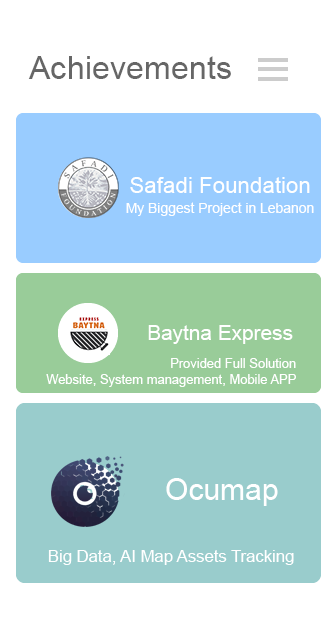
<style>
.page{position:relative;width:336px;height:626px;background:#ffffff}
.page>*{position:absolute;margin:0}
.t1{font:32.3px "ArialMT";color:#666666}
.t2{font:22.4px "ArialMT";color:#ffffff}
.t3{font:13.9px "ArialMT";color:#ffffff}
.t4{font:20.8px "ArialMT";color:#ffffff}
.t5{font:12.9px "ArialMT";color:#ffffff}
.t6{font:30px "ArialMT";color:#ffffff}
.t7{font:16.7px "ArialMT";color:#ffffff}
</style>
<div class="page">
<p class="t1" style="left:28px;top:56px;width:203px;height:23px">Achievements</p>
<p class="t2" style="left:130px;top:177px;width:180px;height:16px">Safadi Foundation</p>
<p class="t3" style="left:126px;top:202px;width:188px;height:14px">My Biggest Project in Lebanon</p>
<p class="t4" style="left:148px;top:325px;width:145px;height:19px">Baytna Express</p>
<p class="t5" style="left:46px;top:358px;width:250px;height:29px;text-align:right">Provided Full Solution<br>Website, System management, Mobile APP</p>
<p class="t6" style="left:166px;top:478px;width:112px;height:28px">Ocumap</p>
<p class="t7" style="left:48px;top:550px;width:246px;height:15px">Big Data, AI Map Assets Tracking</p>
</div>
